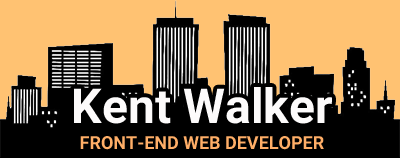
<style>
.page{position:relative;width:400px;height:158px;background:#ffc272}
.page>*{position:absolute;margin:0}
.t1{font:48px "Roboto-Bold";color:#fdfbfb}
.t2{font:18px "Roboto-Bold";color:#ffae67}
</style>
<div class="page">
<p class="t1" style="left:74px;top:87px;width:258px;height:37px">Kent Walker</p>
<p class="t2" style="left:80px;top:136px;width:244px;height:14px">FRONT-END WEB DEVELOPER</p>
</div>
